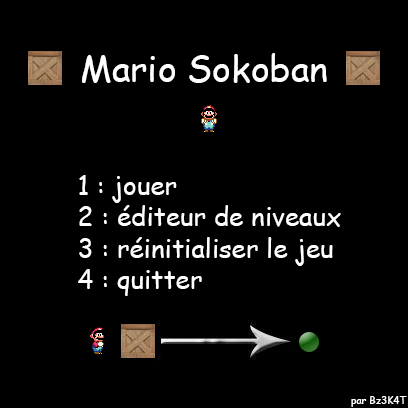
<style>
.page{position:relative;width:408px;height:408px;background:#000000}
.page>*{position:absolute;margin:0}
.t1{font:36px "ComicSansMS";color:#ffffff}
.t2{font:26px "ComicSansMS";color:#ffffff}
.t3{font:10px "ComicSansMS";color:#ffffff}
</style>
<div class="page">
<p class="t1" style="left:82px;top:53px;width:245px;height:30px">Mario Sokoban</p>
<p class="t2" style="left:78px;top:175px;width:263px;height:121px">1 : jouer<br>          2 : éditeur de niveaux<br>          3 : réinitialiser le jeu<br>          4 : quitter</p>
<p class="t3" style="left:351px;top:396px;width:56px;height:11px">par Bz3K4T</p>
</div>
